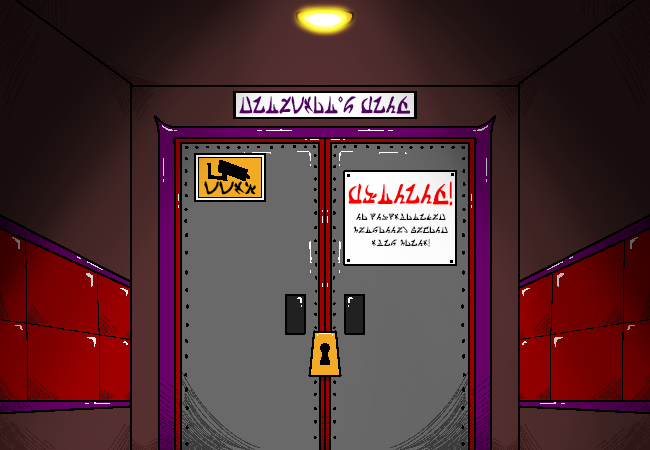
<style>
.page{position:relative;width:650px;height:450px}
.page>*{position:absolute;margin:0}
.t1{font:29.3px "HiveswapAlternian-Regular";color:#540266;scale:0.7 1}
.t2{font:21.7px "HiveswapAlternian-Regular";color:#000000;scale:1.1 1}
.t3{font:34.1px "HiveswapAlternian-Regular";color:#ff0000;scale:0.7 1}
.t4{font:11px "HiveswapAlternian-Regular";color:#090909}
</style>
<div class="page">
<p class="t1" style="left:239px;top:96px;width:171px;height:18px">DIRECTOR'S WING</p>
<p class="t2" style="left:204px;top:181px;width:52px;height:14px">CCTV</p>
<p class="t3" style="left:348px;top:181px;width:105px;height:25px">WARNING!</p>
<p class="t4" style="left:353px;top:213px;width:95px;height:34px;text-align:center">NO UNAUTHORIZED<br>PERSONNEL BEYOND<br>THIS POINT!</p>
</div>
